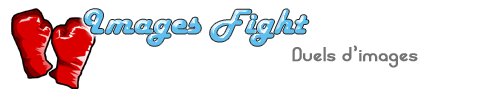
<style>
.page{position:relative;width:500px;height:104px;background:#ffffff}
.page>*{position:absolute;margin:0}
.t1{font:35px "HarlowSolid";font-weight:bold;scale:1.1 1}
.t2{font:16px "curls";color:#737373;font-weight:bold;scale:1.1 1}
</style>
<div class="page">
<p class="t1" style="left:84px;top:9px;width:225px;height:37px">Images Fight</p>
<p class="t2" style="left:292px;top:45px;width:126px;height:23px">Duels d'images</p>
</div>
